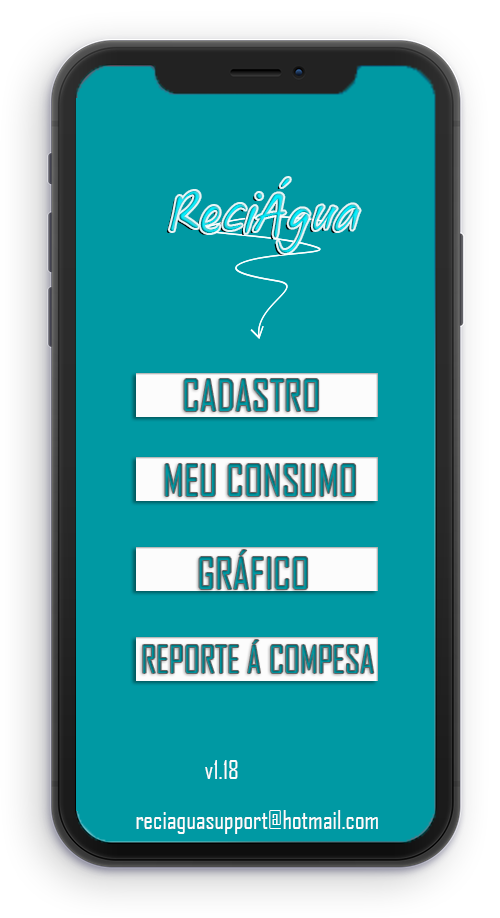
<style>
.page{position:relative;width:500px;height:918px;background:#0099a3}
.page>*{position:absolute;margin:0}
.t1{font:60px "Xyling"}
.t2{font:42.4px "AgencyFB-Reg";color:#0099a3}
.t3{font:42.4px "AgencyFB-Reg";color:#008c95}
.t4{font:36px "AgencyFB-Reg";color:#008189}
.t5{font:25.4px "AgencyFB-Reg";color:#fcfcfc}
</style>
<div class="page">
<p class="t1" style="left:169px;top:178px;width:191px;height:75px">ReciÁgua</p>
<p class="t2" style="left:184px;top:379px;width:135px;height:32px">CADASTRO</p>
<p class="t2" style="left:165px;top:464px;width:191px;height:32px">MEU CONSUMO</p>
<p class="t3" style="left:199px;top:550px;width:109px;height:39px">GRÁFICO</p>
<p class="t4" style="left:143px;top:640px;width:231px;height:33px">REPORTE Á COMPESA</p>
<p class="t5" style="left:205px;top:760px;width:33px;height:19px">v1.18</p>
<p class="t5" style="left:136px;top:810px;width:242px;height:24px">reciaguasupport@hotmail.com</p>
</div>
